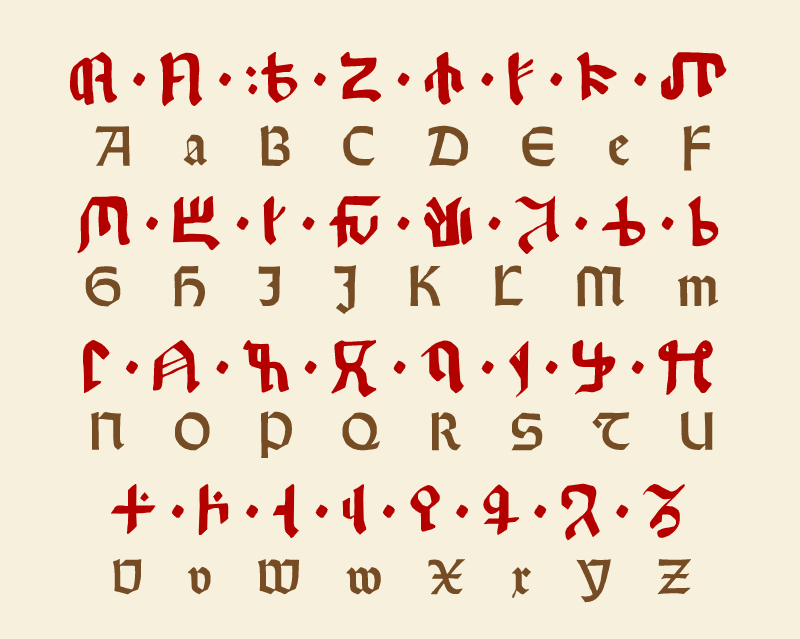
<style>
.page{position:relative;width:800px;height:639px;background:#f6f0dc}
.page>*{position:absolute;margin:0}
.t1{font:60px "Kitisakkullian";color:#b50000}
.t2{font:56px "Orotund-Heavy";color:#764c24}
.t3{font:53px "Orotund-Heavy";color:#764c24}
.t4{font:49px "Orotund-Heavy";color:#764c24}
</style>
<div class="page">
<p class="t1" style="left:70px;top:51px;width:657px;height:490px;text-align:center">A a B C D E e F<br><br>G H I J K L M m<br><br>N O P Q R S T U<br><br>V v W w X x Y Z</p>
<p class="t2" style="left:85px;top:125px;width:634px;height:478px;text-align:center">A   a   B   C   D   E   e   F<br><br>G   H   I   J   K   L   M   m<br><br><span class="t3">N   O   P   Q   R   S   T   U<br><br></span><span class="t4">V   v   W   w   X   x   Y   Z</span></p>
</div>
